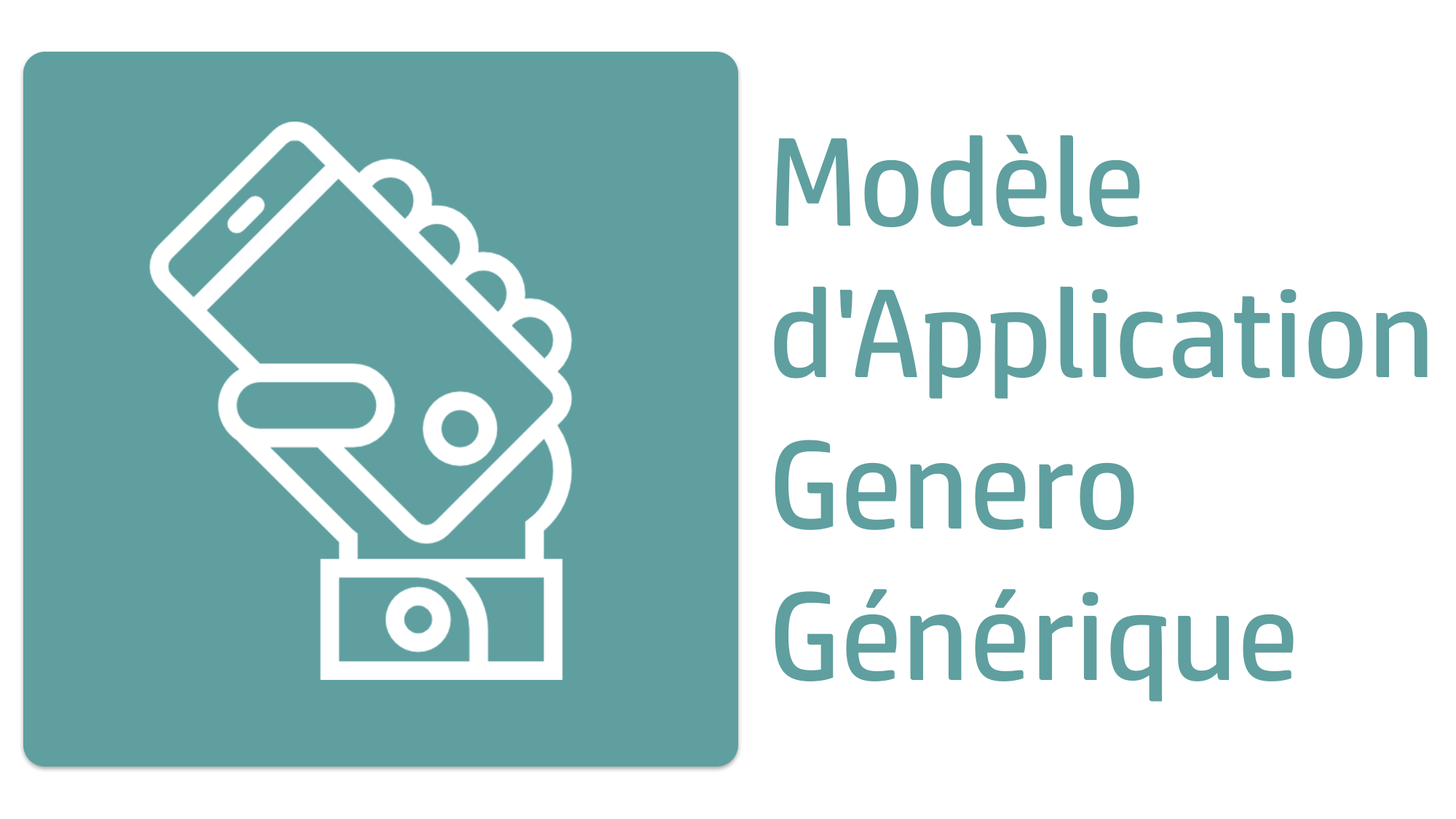
<style>
.page{position:relative;width:1456px;height:819px;background:#ffffff}
.page>*{position:absolute;margin:0}
.t1{font:126.1px "HPSimplified-Regular";color:#5f9f9f}
</style>
<div class="page">
<p class="t1" style="left:774px;top:135px;width:654px;height:567px">Modèle<br>d'Application<br>Genero<br>Générique</p>
</div>
